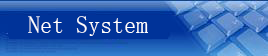
<style>
.page{position:relative;width:268px;height:56px;background:#003399}
.page>*{position:absolute;margin:0}
.t1{font:24px "SimSun";color:#ffffff}
</style>
<div class="page">
<p class="t1" style="left:28px;top:16px;width:120px;height:20px">Net System</p>
</div>
